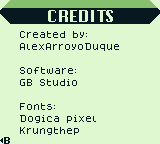
<style>
.page{position:relative;width:160px;height:144px;background:#e0f8cf}
.page>*{position:absolute;margin:0}
.t1{font:16px "Krungthep";color:#e0f8cf}
.t2{font:8px/12px "Dogica_Pixel";color:#071821}
.t3{font:8px "PressStart2P-Regular";color:#071821;scale:0.87 1}
</style>
<div class="page">
<p class="t1" style="left:48px;top:10px;width:65px;height:12px">CREDITS</p>
<p class="t2" style="left:20px;top:31px;width:99px;height:104px">Created by:<br>AlexArroyoDuque<br><br>Software:<br>GB Studio<br><br>Fonts:<br>Dogica pixel<br>Krungthep</p>
<p class="t3" style="left:4px;top:137px;width:6px;height:7px">B</p>
</div>
